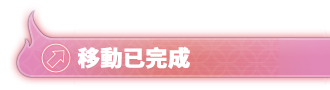
<style>
.page{position:relative;width:330px;height:90px;background:#ffffff}
.page>*{position:absolute;margin:0}
.t1{font:22px "SourceHanSansCN-Heavy";color:#ffffff;font-weight:bold}
</style>
<div class="page">
<p class="t1" style="left:77px;top:46px;width:113px;height:23px">移動已完成</p>
</div>
